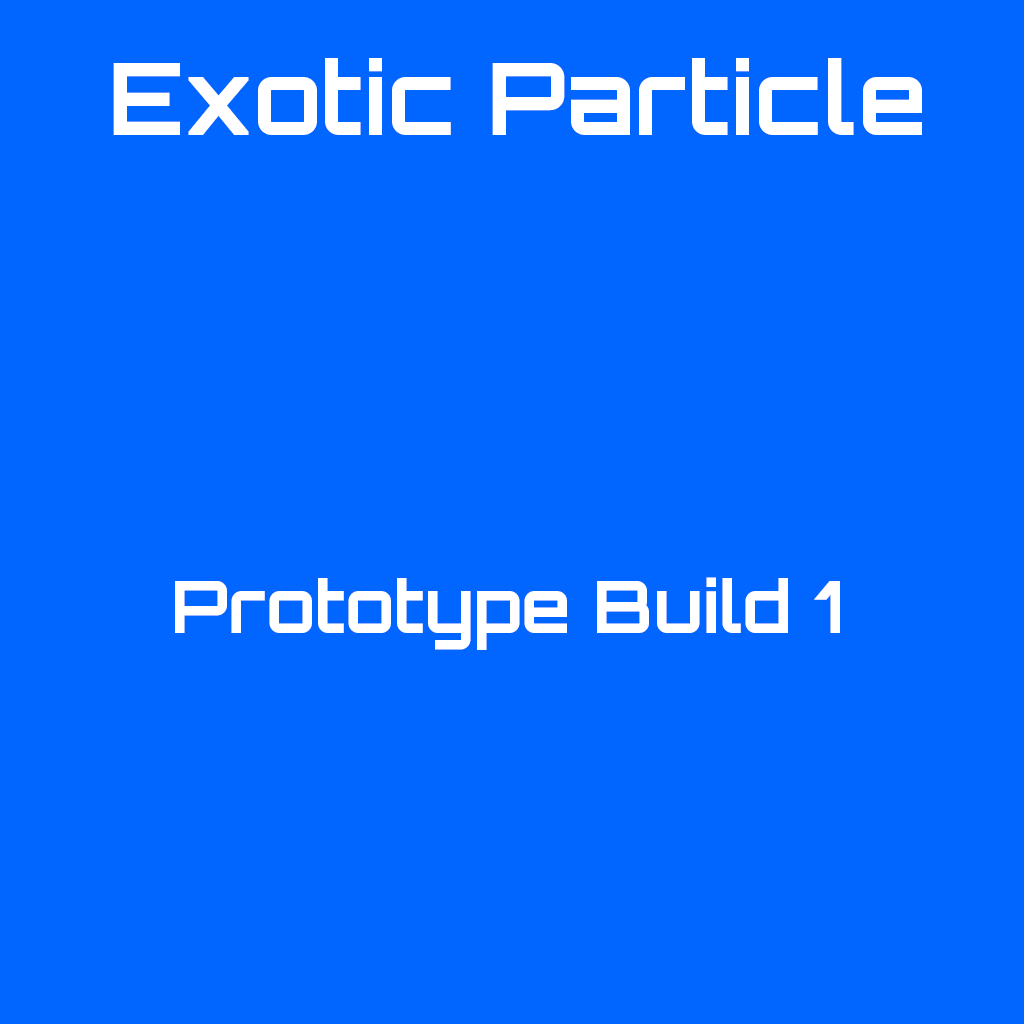
<style>
.page{position:relative;width:1024px;height:1024px;background:#0066ff}
.page>*{position:absolute;margin:0}
.t1{font:100px "Orbitron-Bold";color:#ffffff}
.t2{font:72px "Orbitron-Bold";color:#ffffff}
</style>
<div class="page">
<p class="t1" style="left:113px;top:58px;width:809px;height:77px">Exotic Particle</p>
<p class="t2" style="left:175px;top:577px;width:665px;height:73px">Prototype Build 1</p>
</div>
